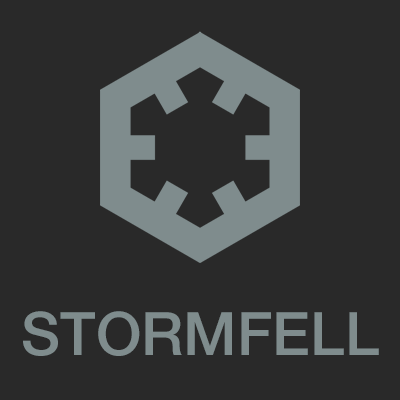
<style>
.page{position:relative;width:400px;height:400px;background:#292929}
.page>*{position:absolute;margin:0}
.t1{font:60px "HelveticaNeue-Medium";color:#7f8c8d}
</style>
<div class="page">
<p class="t1" style="left:23px;top:311px;width:356px;height:45px">STORMFELL</p>
</div>
